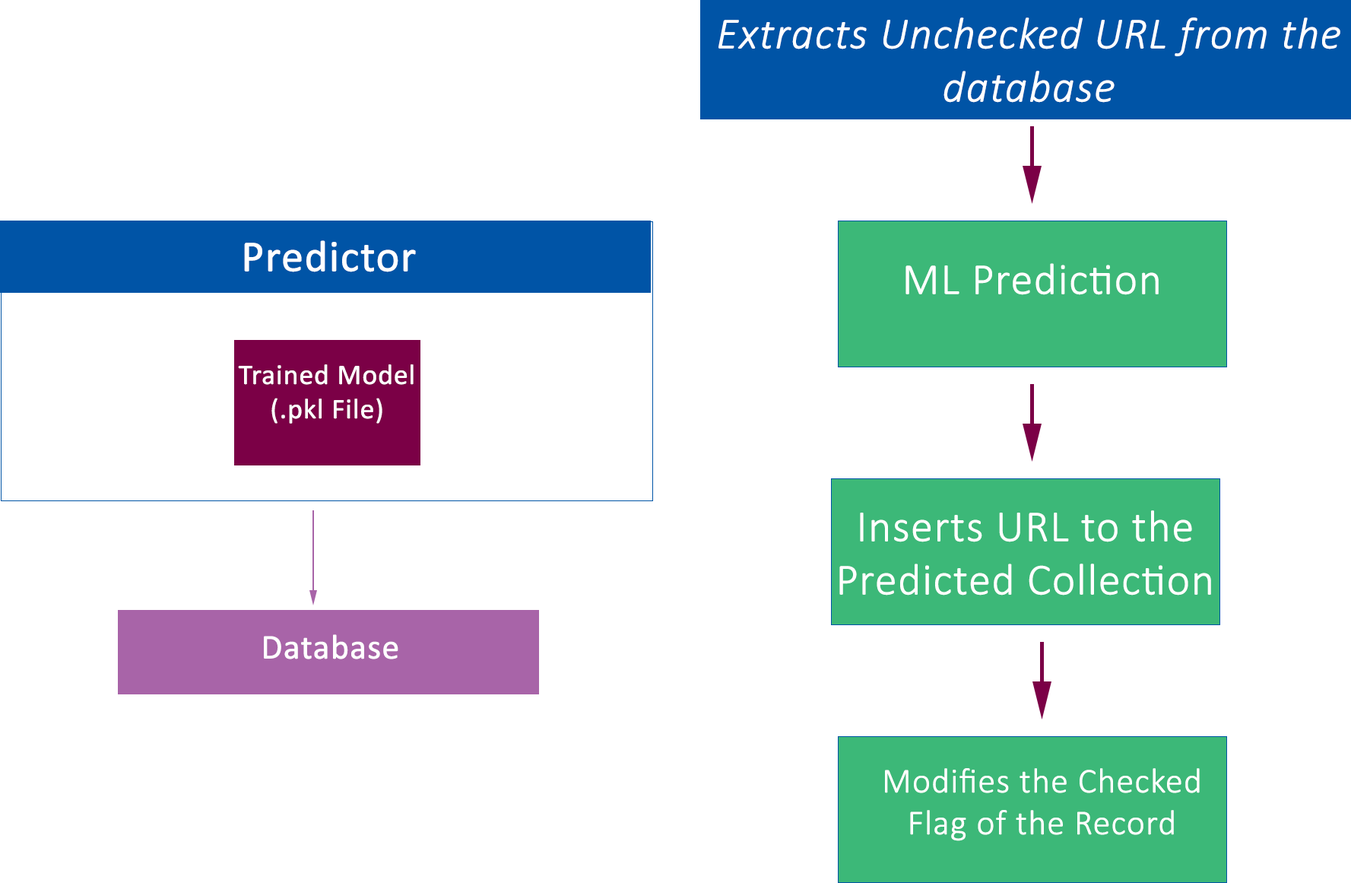
<style>
.page{position:relative;width:1351px;height:883px;background:#ffffff}
.page>*{position:absolute;margin:0}
.t1{font:44.3px "Calibri-LightItalic";color:#ffffff;font-weight:bold}
.t2{font:44.3px "Calibri";color:#ffffff;font-weight:bold}
.t3{font:44.3px "Calibri-Light";color:#ffffff;font-weight:bold}
.t4{font:28.5px "Calibri";color:#ffffff;font-weight:bold}
.t5{font:34.8px "Calibri";color:#ffffff;font-weight:bold}
.t6{font:34.8px "Calibri-Light";color:#ffffff;font-weight:bold}
</style>
<div class="page">
<p class="t1" style="left:718px;top:17px;width:622px;height:86px;text-align:center">Extracts Unchecked URL from the database</p>
<p class="t2" style="left:244px;top:240px;width:172px;height:32px">Predictor</p>
<p class="t3" style="left:905px;top:263px;width:254px;height:32px">ML Prediction</p>
<p class="t4" style="left:238px;top:364px;width:176px;height:59px;text-align:center">Trained Model<br>(.pkl File)</p>
<p class="t3" style="left:839px;top:510px;width:372px;height:85px;text-align:center">Inserts URL to the Predicted Collection</p>
<p class="t5" style="left:264px;top:634px;width:134px;height:25px">Database</p>
<p class="t6" style="left:885px;top:768px;width:315px;height:73px;text-align:center">Modifies the Checked Flag of the Record</p>
</div>
